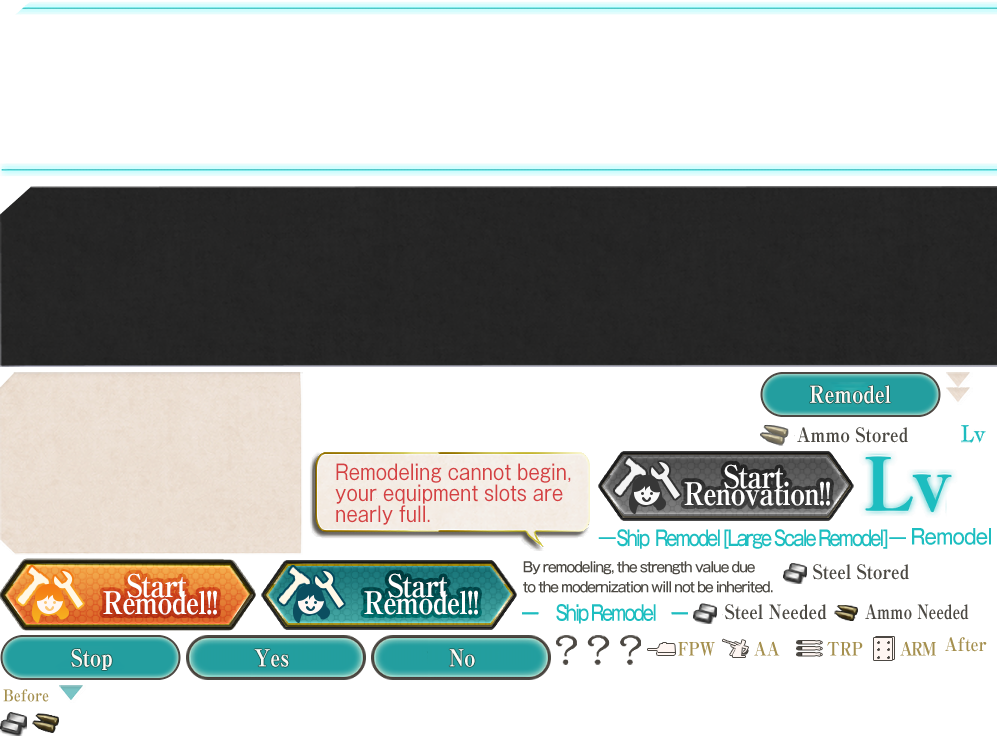
<style>
.page{position:relative;width:997px;height:736px;background:#ffffff}
.page>*{position:absolute;margin:0}
.t1{font:23.2px "RyuminPro-ExBold";color:#fcfaf6;scale:0.86 1}
.t2{font:19.7px "RyuminPro-ExBold";color:#4c4943;scale:0.86 1}
.t3{font:20.9px/21px "GothicMB101Pro-Regular";color:#d54143;scale:0.86 1}
.t4{font:20.9px "GothicMB101Pro-Medium";letter-spacing:-0.12em;color:#1dbec0;scale:0.78 1}
.t5{font:20.9px "GothicMB101Pro-Medium";letter-spacing:-0.04em;color:#1dbec0;scale:0.86 1}
.t6{font:14px/20px "GothicMB101Pro-Medium";letter-spacing:-0.08em;color:#4c4943;scale:0.9 1}
.t7{font:31.3px/17px "RyuminPro-ExBold";letter-spacing:-0.04em;color:#ffffff;scale:0.86 1}
.t8{font:19.7px "RyuminPro-ExBold";color:#4c4943;scale:0.77 1}
.t9{font:18.6px "RyuminPro-ExBold";color:#a5904f;scale:0.86 1}
.t10{font:18.6px "RyuminPro-ExBold";letter-spacing:-0.1em;color:#a5904f;scale:0.86 1}
.t11{font:16.2px "RyuminPro-ExBold";color:#a5904f;scale:0.86 1}
</style>
<div class="page">
<p class="t1" style="left:810px;top:385px;width:81px;height:19px">Remodel</p>
<p class="t2" style="left:797px;top:427px;width:111px;height:16px">Ammo Stored</p>
<p class="t3" style="left:335px;top:463px;width:236px;height:62px">Remodeling cannot begin,<br>your equipment slots are<br>nearly full.</p>
<p class="t4" style="left:617px;top:529px;width:271px;height:20px">Ship  Remodel [Large Scale Remodel]</p>
<p class="t5" style="left:912px;top:528px;width:79px;height:17px">Remodel</p>
<p class="t6" style="left:523px;top:561px;width:250px;height:32px">By remodeling, the strength value due<br>to the modernization will not be inherited.</p>
<p class="t2" style="left:813px;top:564px;width:96px;height:16px">Steel Stored</p>
<p class="t7" style="left:103px;top:573px;width:114px;height:42px;text-align:center">Start <br>Remodel!!</p>
<p class="t7" style="left:364px;top:573px;width:114px;height:42px;text-align:center">Start <br>Remodel!!</p>
<p class="t4" style="left:556px;top:604px;width:100px;height:20px">Ship Remodel</p>
<p class="t2" style="left:725px;top:604px;width:102px;height:16px">Steel Needed</p>
<p class="t8" style="left:865px;top:604px;width:104px;height:16px">Ammo Needed</p>
<p class="t9" style="left:754px;top:641px;width:26px;height:15px">AA</p>
<p class="t10" style="left:900px;top:641px;width:36px;height:15px">ARM</p>
<p class="t9" style="left:945px;top:637px;width:42px;height:15px">After</p>
<p class="t1" style="left:71px;top:649px;width:41px;height:21px">Stop</p>
<p class="t1" style="left:254px;top:649px;width:35px;height:18px">Yes</p>
<p class="t1" style="left:449px;top:649px;width:26px;height:18px">No</p>
<p class="t9" style="left:678px;top:642px;width:37px;height:14px">FPW</p>
<p class="t9" style="left:827px;top:642px;width:36px;height:14px">TRP</p>
<p class="t11" style="left:3px;top:689px;width:46px;height:13px">Before</p>
</div>
